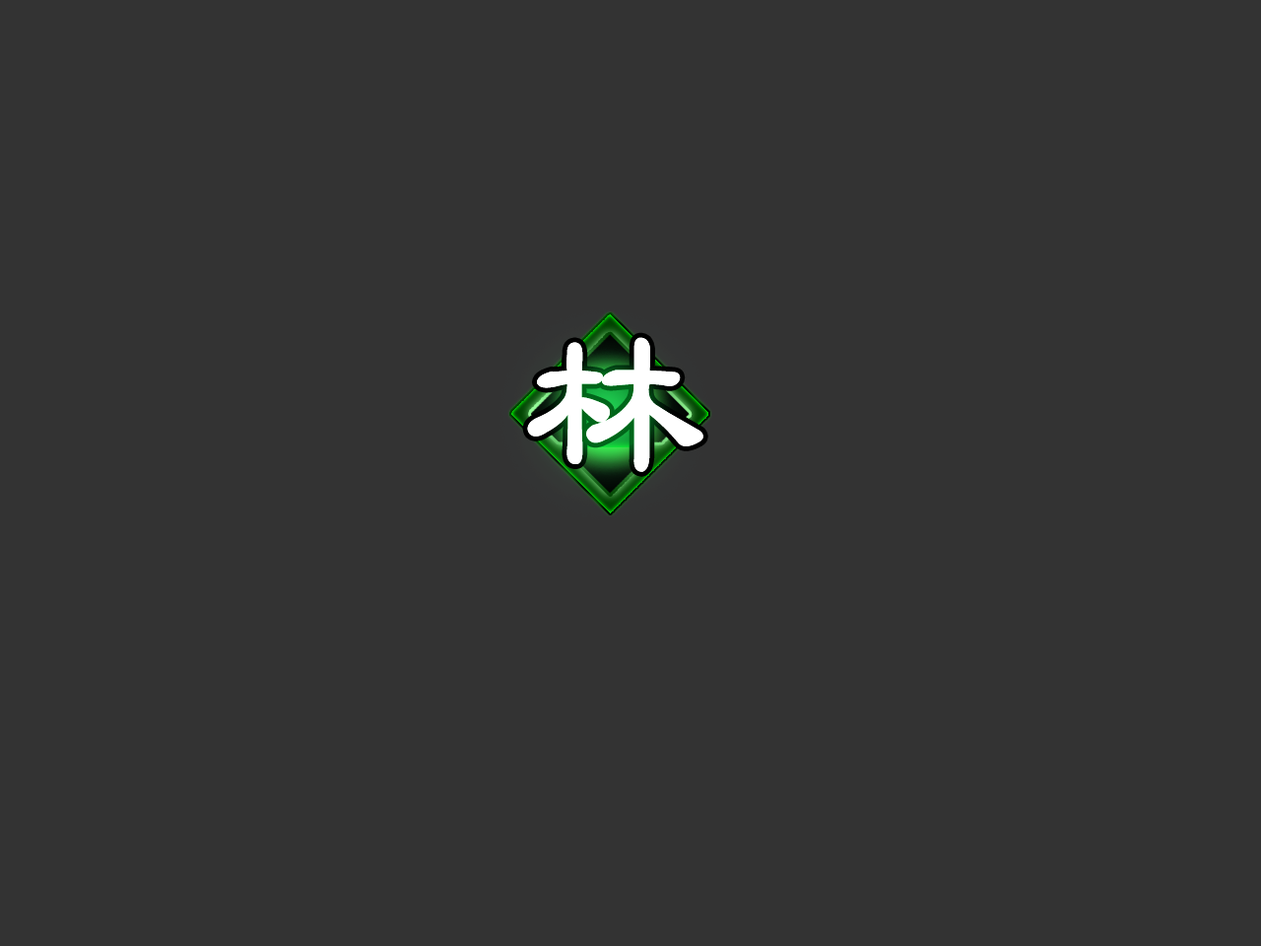
<style>
.page{position:relative;width:1261px;height:946px;background:#333333}
.page>*{position:absolute;margin:0}
.t1{font:175.5px "FZLBFW--GB1-0";letter-spacing:0.075em;color:#ffffff;font-weight:bold;scale:1.05 1}
</style>
<div class="page">
<p class="t1" style="left:527px;top:337px;width:176px;height:135px">林</p>
<p class="t1" style="left:527px;top:337px;width:176px;height:135px">林</p>
</div>
